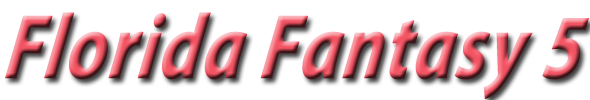
<style>
.page{position:relative;width:590px;height:100px;background:#ffffff}
.page>*{position:absolute;margin:0}
.t1{font:92px "MyriadPro-BoldIt";font-weight:bold;font-style:italic;scale:0.79 1}
</style>
<div class="page">
<p class="t1" style="left:5px;top:12px;width:584px;height:87px">Florida Fantasy 5</p>
</div>
